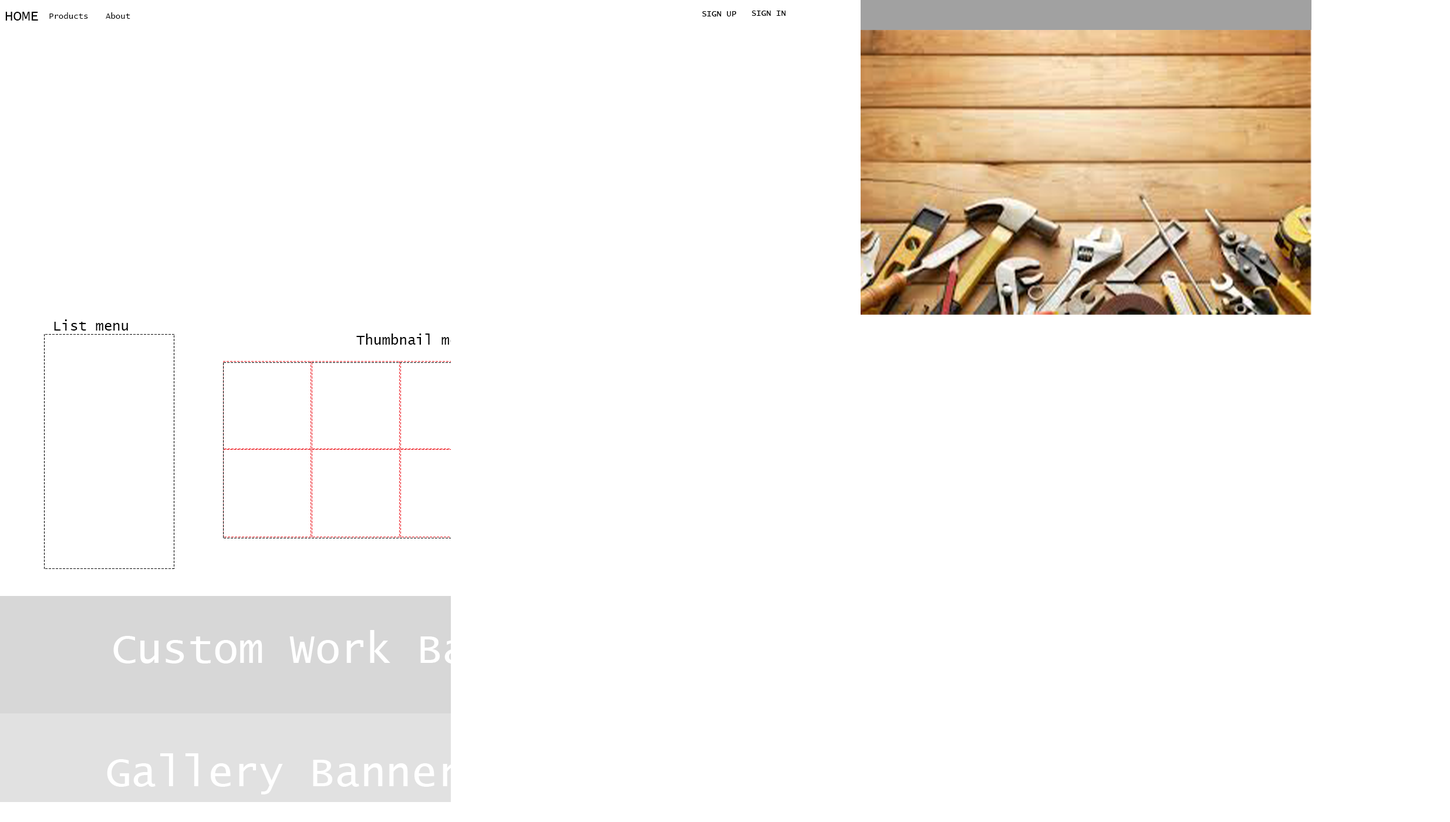
<style>
.page{position:relative;width:1450px;height:822px;background:#ffffff}
.page>*{position:absolute;margin:0}
.t1{font:14.1px "LucidaConsole";color:#000000}
.t2{font:8.2px "LucidaConsole";color:#000000}
.t3{font:42.3px "LucidaConsole";color:#ffffff}
</style>
<div class="page">
<p class="t1" style="left:5px;top:12px;width:33px;height:9px">HOME</p>
<p class="t2" style="left:49px;top:12px;width:39px;height:7px">Products</p>
<p class="t2" style="left:106px;top:12px;width:24px;height:7px">About</p>
<p class="t2" style="left:702px;top:11px;width:34px;height:5px">SIGN UP</p>
<p class="t2" style="left:752px;top:11px;width:34px;height:5px">SIGN IN</p>
<p class="t1" style="left:54px;top:319px;width:74px;height:12px">List menu</p>
<p class="t1" style="left:356px;top:334px;width:118px;height:11px">Thumbnail menu</p>
<p class="t3" style="left:113px;top:630px;width:454px;height:34px">Custom Work Banner</p>
<p class="t3" style="left:107px;top:753px;width:353px;height:42px">Gallery Banner</p>
</div>
